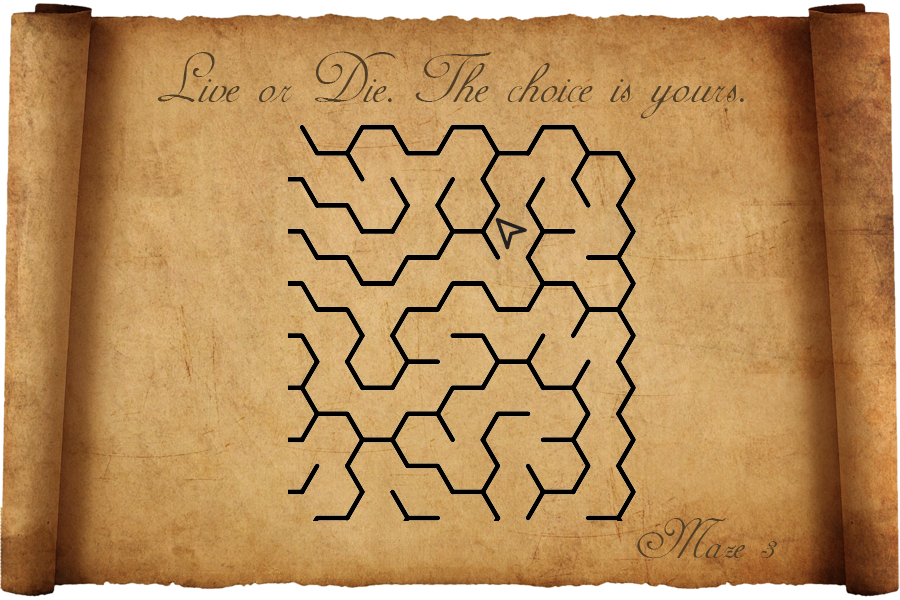
<style>
.page{position:relative;width:900px;height:600px}
.page>*{position:absolute;margin:0}
.t1{font:80px "AdineKirnberg-Script";color:#513e27}
.t2{font:64px "AdineKirnberg-Script";color:#513e27}
</style>
<div class="page">
<p class="t1" style="left:157px;top:51px;width:587px;height:68px">Live or Die. The choice is yours.</p>
<p class="t2" style="left:637px;top:518px;width:140px;height:40px">Maze 3</p>
</div>
